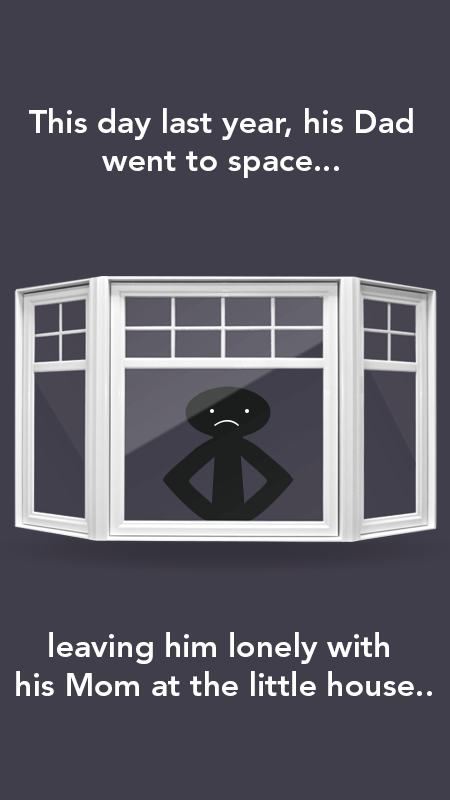
<style>
.page{position:relative;width:450px;height:800px;background:#413e4b}
.page>*{position:absolute;margin:0}
.t1{font:32px "AvenirLTStd-Heavy";color:#ffffff}
</style>
<div class="page">
<p class="t1" style="left:29px;top:108px;width:384px;height:70px;text-align:center">This day last year, his Dad<br>went to space...</p>
<p class="t1" style="left:16px;top:632px;width:416px;height:64px;text-align:center">leaving him lonely with <br>his Mom at the little house..</p>
</div>
